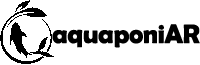
<style>
.page{position:relative;width:200px;height:65px;background:#ffffff}
.page>*{position:absolute;margin:0}
.t1{font:27px "BerlinSansFBDemi-Bold";letter-spacing:-0.02em;color:#000000}
</style>
<div class="page">
<p class="t1" style="left:52px;top:24px;width:148px;height:24px">aquaponiAR</p>
</div>
